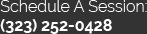
<style>
.page{position:relative;width:147px;height:34px;background:#333333}
.page>*{position:absolute;margin:0}
.t1{font:16px "Raleway-Light";color:#ffffff}
.t2{font:16px "Raleway-Bold";color:#ffffff}
</style>
<div class="page">
<p class="t1" style="left:0px;top:0px;width:147px;height:34px">Schedule A Session:<br><span class="t2">(323) 252-0428</span></p>
</div>
